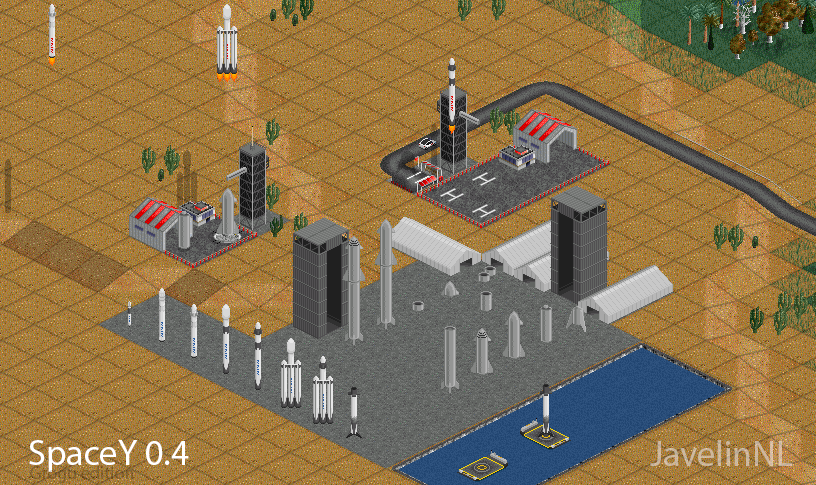
<style>
.page{position:relative;width:816px;height:485px}
.page>*{position:absolute;margin:0}
.t1{font:36px "MyriadPro-Regular";color:#ffffff}
.t2{font:36px "MyriadPro-Regular";color:#c7b59e}
.t3{font:18px "MyriadPro-Regular"}
</style>
<div class="page">
<p class="t1" style="left:29px;top:440px;width:160px;height:32px">SpaceY 0.4</p>
<p class="t2" style="left:650px;top:440px;width:143px;height:26px">JavelinNL</p>
<p class="t3" style="left:30px;top:466px;width:103px;height:17px">Grogu edition</p>
</div>
